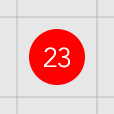
<style>
.page{position:relative;width:114px;height:114px;background:#e7e7e7}
.page>*{position:absolute;margin:0}
.t1{font:27.2px "Avenir-Light";color:#ffffff}
</style>
<div class="page">
<p class="t1" style="left:44px;top:47px;width:26px;height:21px">23</p>
</div>
